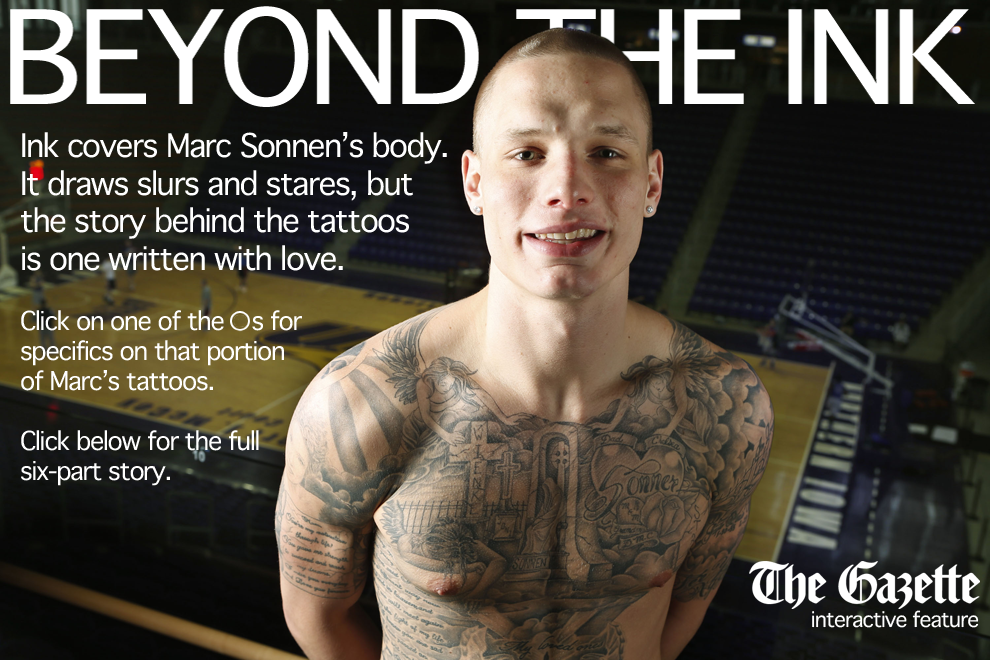
<style>
.page{position:relative;width:990px;height:660px}
.page>*{position:absolute;margin:0}
.t1{font:31.2px "Thonburi";letter-spacing:-0.05em;color:#ffffff}
.t2{font:25px "Thonburi";letter-spacing:-0.05em;color:#ffffff}
.t3{font:20.8px "Thonburi";letter-spacing:-0.05em;color:#ffffff}
</style>
<div class="page">
<p class="t1" style="left:21px;top:132px;width:426px;height:139px">Ink covers Marc Sonnen’s body. <br>It draws slurs and stares, but <br>the story behind the tattoos <br>is one written with love.</p>
<p class="t2" style="left:21px;top:310px;width:281px;height:176px">Click on one of the    s for <br>specifics on that portion <br>of Marc’s tattoos.<br> <br>Click below for the full<br>six-part story.</p>
<p class="t3" style="left:812px;top:610px;width:167px;height:18px">interactive feature</p>
</div>
